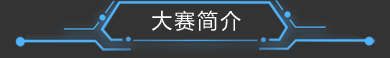
<style>
.page{position:relative;width:390px;height:58px;background:#333333}
.page>*{position:absolute;margin:0}
.t1{font:20.8px "MicrosoftYaHei";letter-spacing:0.1em;color:#ffffff}
</style>
<div class="page">
<p class="t1" style="left:151px;top:10px;width:90px;height:21px">大赛简介</p>
</div>
